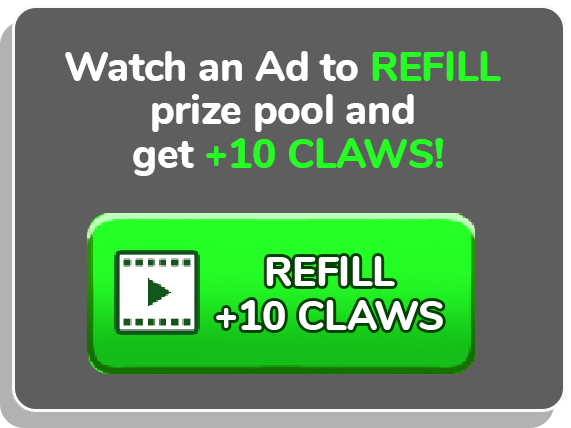
<style>
.page{position:relative;width:571px;height:428px;background:#5e5e5e}
.page>*{position:absolute;margin:0}
.t1{font:40.5px/43.4px "Nunito-ExtraBold";letter-spacing:-0.01em;color:#ffffff}
.t2{font:40.5px/43.4px "Nunito-ExtraBold";letter-spacing:-0.01em;color:#24fc24}
</style>
<div class="page">
<p class="t1" style="left:65px;top:51px;width:436px;height:125px;text-align:center">Watch an Ad to <span class="t2">REFILL <br></span>prize pool and <br>get<span class="t2"> +10 CLAWS!</span></p>
<p class="t1" style="left:216px;top:256px;width:227px;height:74px;text-align:center">REFILL<br>+10 CLAWS</p>
</div>
